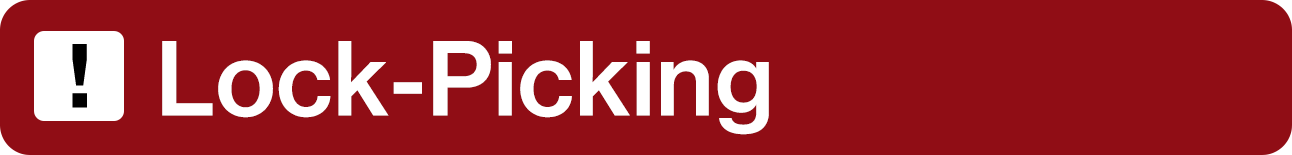
<style>
.page{position:relative;width:1292px;height:155px;background:#900d15}
.page>*{position:absolute;margin:0}
.t1{font:100px "NHaasGroteskTXPro-65Md";color:#ffffff}
</style>
<div class="page">
<p class="t1" style="left:162px;top:41px;width:607px;height:94px">Lock-Picking</p>
</div>
